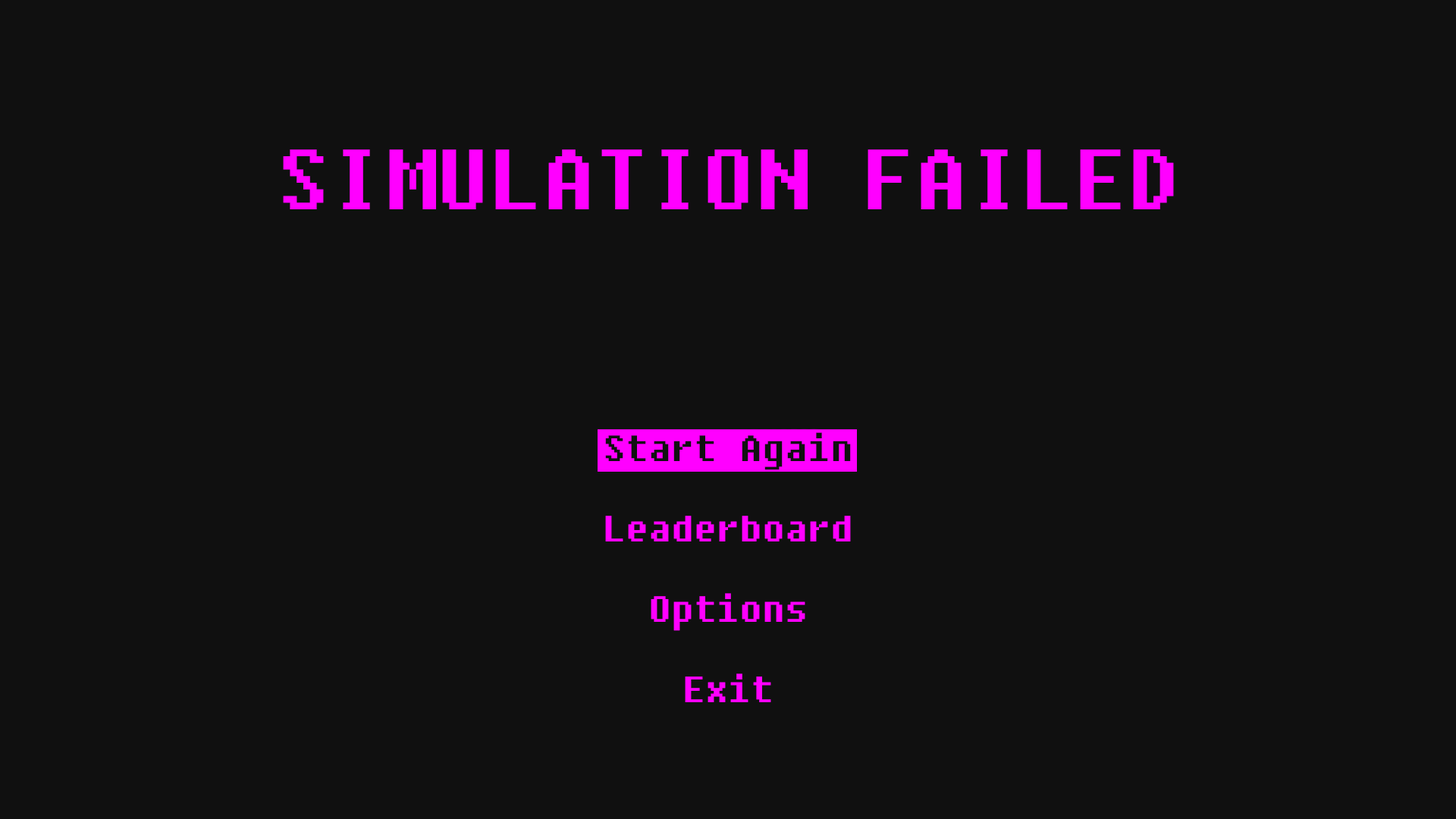
<style>
.page{position:relative;width:1456px;height:819px;background:#101010}
.page>*{position:absolute;margin:0}
.t1{font:85px "Fixedsys";color:#ff00ff}
.t2{font:36.4px "Fixedsys";color:#101010}
.t3{font:36.4px "Fixedsys";color:#ff00ff}
</style>
<div class="page">
<p class="t1" style="left:283px;top:149px;width:891px;height:60px">SIMULATION FAILED</p>
<p class="t2" style="left:605px;top:432px;width:246px;height:38px">Start Again</p>
<p class="t3" style="left:605px;top:516px;width:246px;height:25px">Leaderboard</p>
<p class="t3" style="left:651px;top:593px;width:154px;height:38px">Options</p>
<p class="t3" style="left:685px;top:673px;width:86px;height:29px">Exit</p>
</div>
